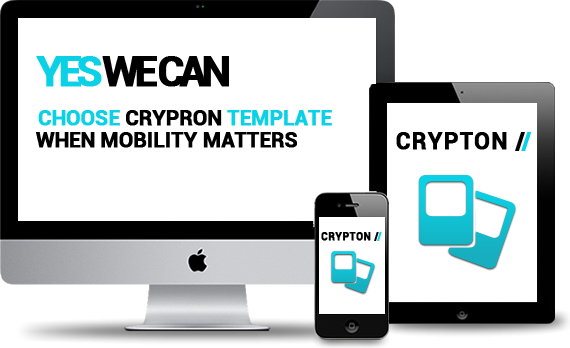
<style>
.page{position:relative;width:570px;height:348px;background:#ffffff}
.page>*{position:absolute;margin:0}
.t1{font:72px "Roboto-Bold";letter-spacing:-0.15em;color:#000000;font-weight:bold}
.t2{font:72px "Roboto-Bold";letter-spacing:-0.15em;color:#0ad1e5;font-weight:bold}
.t3{font:36px "Roboto-Bold";letter-spacing:-0.025em;color:#0ad1e5;text-transform:uppercase;font-weight:bold}
.t4{font:36px "Roboto-Bold";letter-spacing:-0.025em;color:#000000;text-transform:uppercase;font-weight:bold}
.t5{font:39.6px "Roboto-Bold";letter-spacing:0.025em;color:#000000;font-weight:bold}
.t6{font:39.6px "Roboto-Bold";letter-spacing:-0.15em;color:#000000;font-weight:bold}
.t7{font:39.6px "Roboto-Bold";letter-spacing:-0.15em;color:#0ad1e5;font-weight:bold}
.t8{font:17.6px "Roboto-Bold";letter-spacing:0.025em;color:#000000;font-weight:bold}
.t9{font:17.6px "Roboto-Bold";letter-spacing:-0.15em;color:#000000;font-weight:bold}
.t10{font:17.6px "Roboto-Bold";letter-spacing:-0.15em;color:#0ad1e5;font-weight:bold}
</style>
<div class="page">
<p class="t1" style="left:36px;top:56px;width:193px;height:31px"><span class="t2">YES </span>WE CAN</p>
<p class="t3" style="left:38px;top:110px;width:294px;height:16px">choose <span class="t4">crypron </span>template</p>
<p class="t4" style="left:36px;top:132px;width:261px;height:16px">when mobility matters</p>
<p class="t5" style="left:396px;top:132px;width:136px;height:19px">CRYPTON <span class="t6">/</span><span class="t7">/</span></p>
<p class="t8" style="left:321px;top:232px;width:61px;height:9px">CRYPTON <span class="t9">/</span><span class="t10">/</span></p>
</div>
